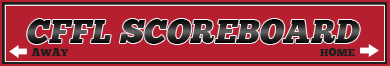
<style>
.page{position:relative;width:390px;height:66px;background:#b61f30}
.page>*{position:absolute;margin:0}
.t1{font:33px "ChunkFiveEx";color:#1e1e1e;text-transform:uppercase;font-style:italic}
.t2{font:11px "ChunkFiveEx";color:#1e1e1e;text-transform:uppercase}
</style>
<div class="page">
<p class="t1" style="left:27px;top:19px;width:333px;height:25px">CFFL SCOREBOARD</p>
<p class="t2" style="left:31px;top:48px;width:38px;height:8px">AWAY</p>
<p class="t2" style="left:320px;top:48px;width:35px;height:8px">HOME</p>
</div>
